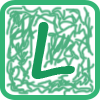
<style>
.page{position:relative;width:100px;height:100px}
.page>*{position:absolute;margin:0}
.t1{font:75px "SegoeScript-Bold";color:#19975a}
</style>
<div class="page">
<p class="t1" style="left:31px;top:22px;width:44px;height:57px">L</p>
</div>
